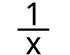
<style>
.page{position:relative;width:70px;height:55px;background:#ffffff}
.page>*{position:absolute;margin:0}
.t1{font:31.8px "DroidSans";color:#000000}
</style>
<div class="page">
<p class="t1" style="left:27px;top:2px;width:9px;height:24px">1</p>
<p class="t1" style="left:17px;top:28px;width:33px;height:3px;rotate:90deg">|</p>
<p class="t1" style="left:26px;top:37px;width:15px;height:18px">x</p>
</div>
